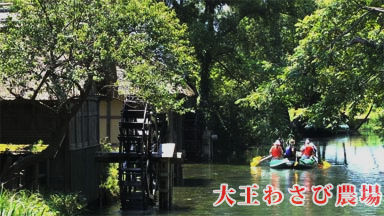
<style>
.page{position:relative;width:384px;height:216px}
.page>*{position:absolute;margin:0}
.t1{font:21px "KozMinPr6N-Heavy";letter-spacing:0.16em}
</style>
<div class="page">
<p class="t1" style="left:214px;top:184px;width:167px;height:22px">大王わさび農場</p>
</div>
